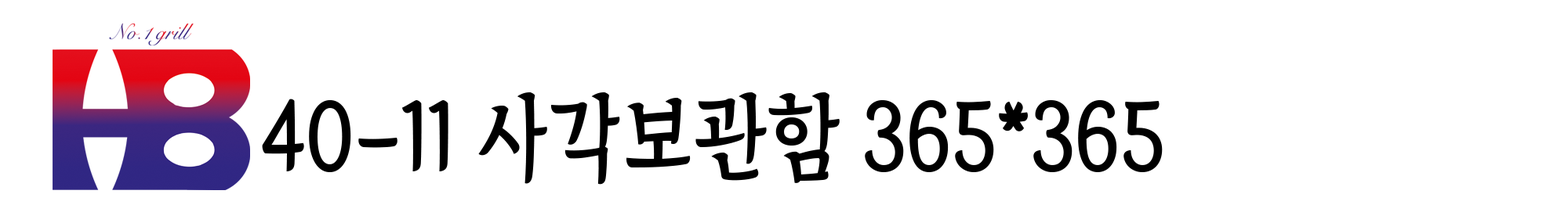
<style>
.page{position:relative;width:1568px;height:205px;background:#ffffff}
.page>*{position:absolute;margin:0}
.t1{font:93.7px "TheIndependenceHallofKorea-Regular";color:#000000;scale:0.89 1}
</style>
<div class="page">
<p class="t1" style="left:262px;top:93px;width:901px;height:92px">40-11 사각보관함 365*365</p>
</div>
